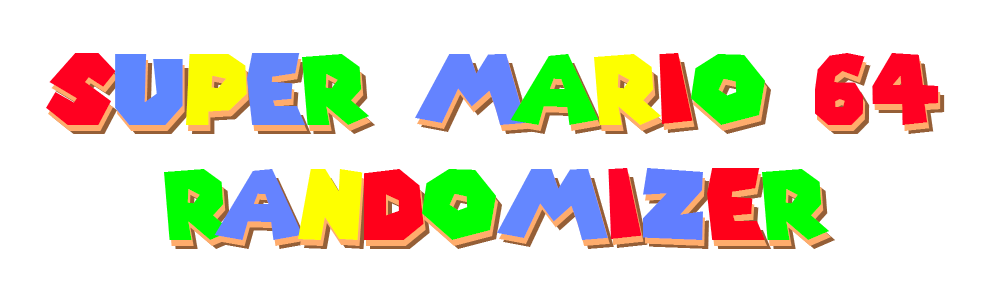
<style>
.page{position:relative;width:1001px;height:287px;background:#ffffff}
.page>*{position:absolute;margin:0}
.t1{font:95.8px "SuperMarioGalaxy";color:#ff0022}
.t2{font:95.8px "SuperMarioGalaxy";color:#ff0020}
.t3{font:95.8px "SuperMarioGalaxy";color:#5e86ff}
.t4{font:95.8px "SuperMarioGalaxy";color:#fbfd00}
.t5{font:95.8px "SuperMarioGalaxy";color:#6284fb}
.t6{font:95.8px "SuperMarioGalaxy";color:#00ff00}
.t7{font:95.8px "SuperMarioGalaxy";color:#6483ff}
.t8{font:95.8px "SuperMarioGalaxy";color:#fdff00}
.t9{font:95.8px "SuperMarioGalaxy";color:#ff0015}
.t10{font:95.8px "SuperMarioGalaxy";color:#6583ff}
.t11{font:95.8px "SuperMarioGalaxy";color:#feff00}
.t12{font:95.8px "SuperMarioGalaxy";color:#ff001a}
.t13{font:95.8px "SuperMarioGalaxy";color:#6487ff}
.t14{font:95.8px "SuperMarioGalaxy";color:#ff0026}
.t15{font:95.8px "SuperMarioGalaxy";color:#617eff}
.t16{font:95.8px "SuperMarioGalaxy";color:#ff0019}
</style>
<div class="page">
<p class="t1" style="left:46px;top:53px;width:893px;height:187px;text-align:center"><span class="t2">S</span><span class="t3">u</span><span class="t4">p</span><span class="t5">e</span><span class="t6">r </span><span class="t7">M</span><span class="t6">a</span><span class="t8">r</span><span class="t9">i</span><span class="t6">o </span>64<br><span class="t6">R</span><span class="t10">a</span><span class="t11">n</span><span class="t12">d</span><span class="t6">o</span><span class="t13">m</span><span class="t14">i</span><span class="t15">z</span><span class="t16">e</span><span class="t6">r</span></p>
</div>
